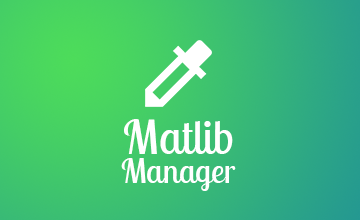
<style>
.page{position:relative;width:360px;height:220px}
.page>*{position:absolute;margin:0}
.t1{font:34px/29px "LobsterTwo";color:#ffffff}
.t2{font:47px/29px "LobsterTwo";color:#ffffff}
</style>
<div class="page">
<p class="t1" style="left:121px;top:119px;width:115px;height:72px;text-align:center"><span class="t2">Matlib<br></span>Manager</p>
</div>
